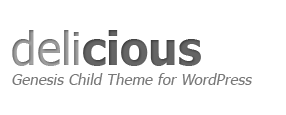
<style>
.page{position:relative;width:286px;height:115px;background:#ffffff}
.page>*{position:absolute;margin:0}
.t1{font:46px "Tahoma-Bold";color:#656565}
.t2{font:46px "Tahoma";color:#a5a5a5}
.t3{font:14.7px "Tahoma";letter-spacing:0.02em;color:#787878;font-style:italic}
</style>
<div class="page">
<p class="t1" style="left:12px;top:30px;width:189px;height:36px"><span class="t2">deli</span>cious</p>
<p class="t3" style="left:12px;top:73px;width:240px;height:12px">Genesis Child Theme for WordPress</p>
</div>
